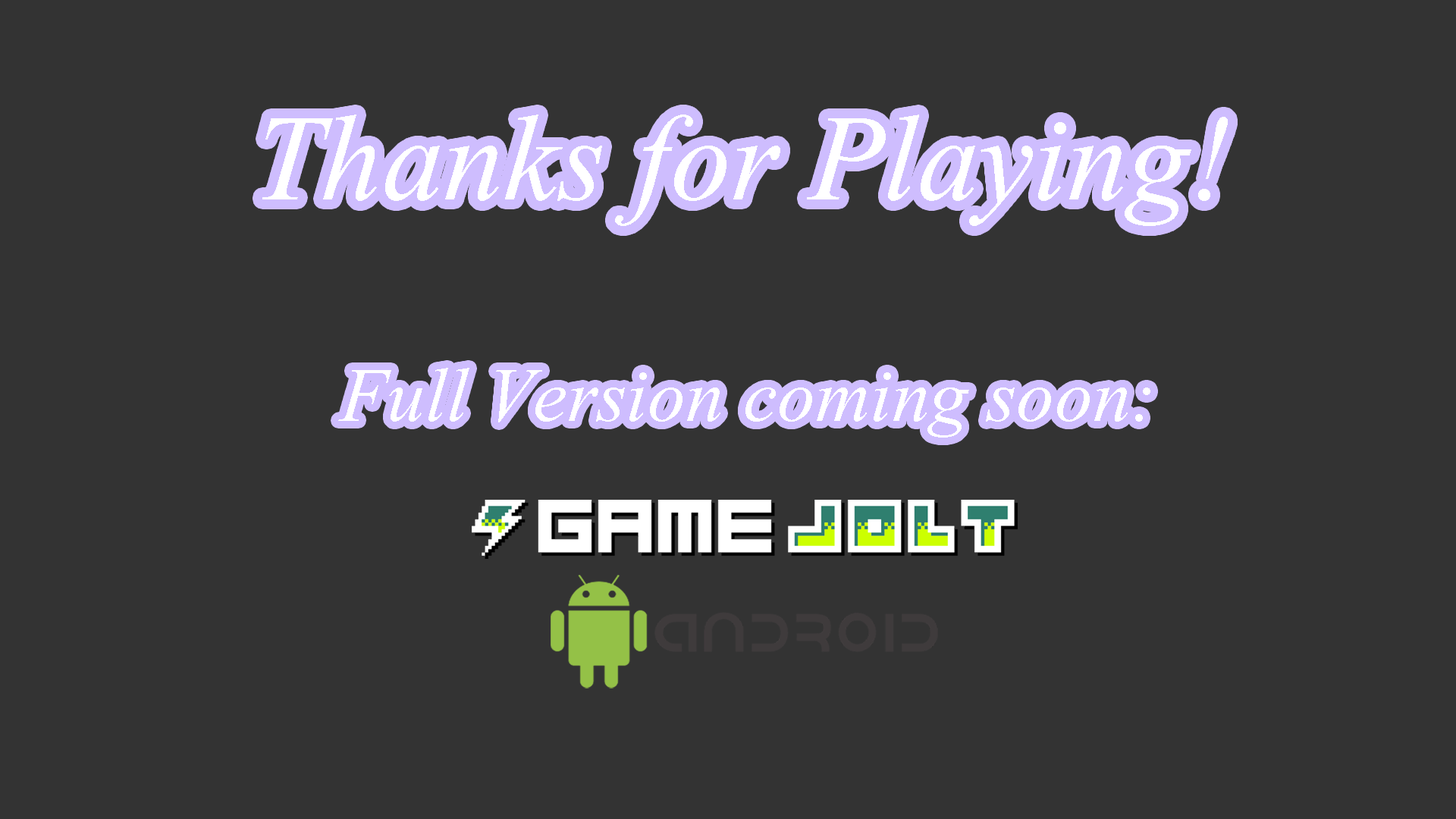
<style>
.page{position:relative;width:1456px;height:819px;background:#333333}
.page>*{position:absolute;margin:0}
.t1{font:151.7px "Vijaya";color:#ffffff}
.t2{font:94.8px "Vijaya";color:#ffffff}
</style>
<div class="page">
<p class="t1" style="left:262px;top:115px;width:966px;height:111px">Thanks for Playing!</p>
<p class="t2" style="left:338px;top:368px;width:812px;height:70px">Full Version coming soon:</p>
</div>
